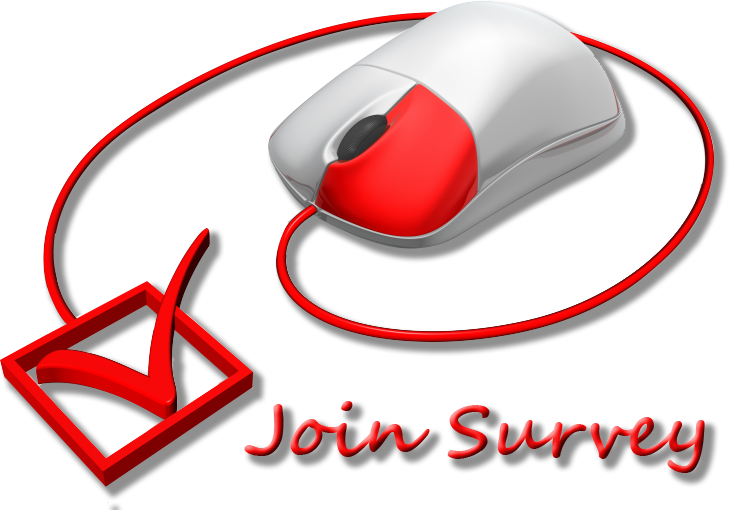
<style>
.page{position:relative;width:743px;height:510px;background:#ffffff}
.page>*{position:absolute;margin:0}
.t1{font:72px "SegoeScript-Bold"}
</style>
<div class="page">
<p class="t1" style="left:244px;top:401px;width:461px;height:72px">Join Survey</p>
</div>
